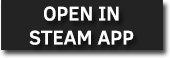
<style>
.page{position:relative;width:170px;height:58px;background:#232323}
.page>*{position:absolute;margin:0}
.t1{font:20px "ClearSans-Medium";color:#ffffff}
</style>
<div class="page">
<p class="t1" style="left:29px;top:6px;width:105px;height:39px;text-align:center">OPEN IN<br>STEAM APP</p>
</div>
